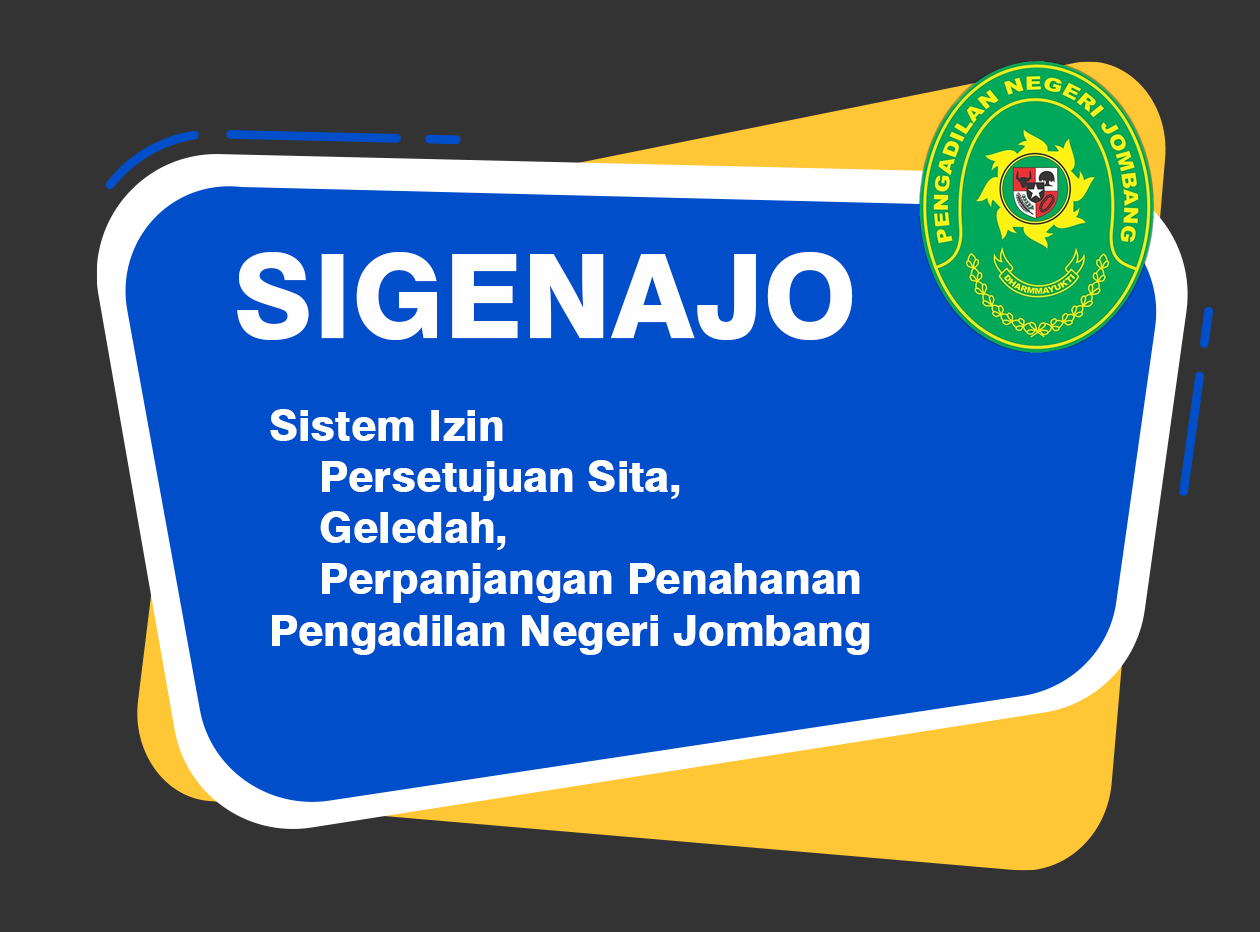
<style>
.page{position:relative;width:1260px;height:932px;background:#004ec9}
.page>*{position:absolute;margin:0}
.t1{font:116.9px "Swiss721BT-Heavy";color:#fefefe}
.t2{font:42.6px "Swiss721BT-Heavy";color:#fefefe}
</style>
<div class="page">
<p class="t1" style="left:237px;top:252px;width:616px;height:88px">SIGENAJO</p>
<p class="t2" style="left:270px;top:409px;width:600px;height:246px">Sistem Izin <br>    Persetujuan Sita, <br>    Geledah,<br>    Perpanjangan Penahanan<br>Pengadilan Negeri Jombang</p>
</div>
